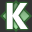
<style>
.page{position:relative;width:32px;height:32px;background:#ffffff}
.page>*{position:absolute;margin:0}
.t1{font:36px "SegoeUI-Bold";color:#ffffff}
</style>
<div class="page">
<p class="t1" style="left:6px;top:3px;width:22px;height:26px">K</p>
</div>
